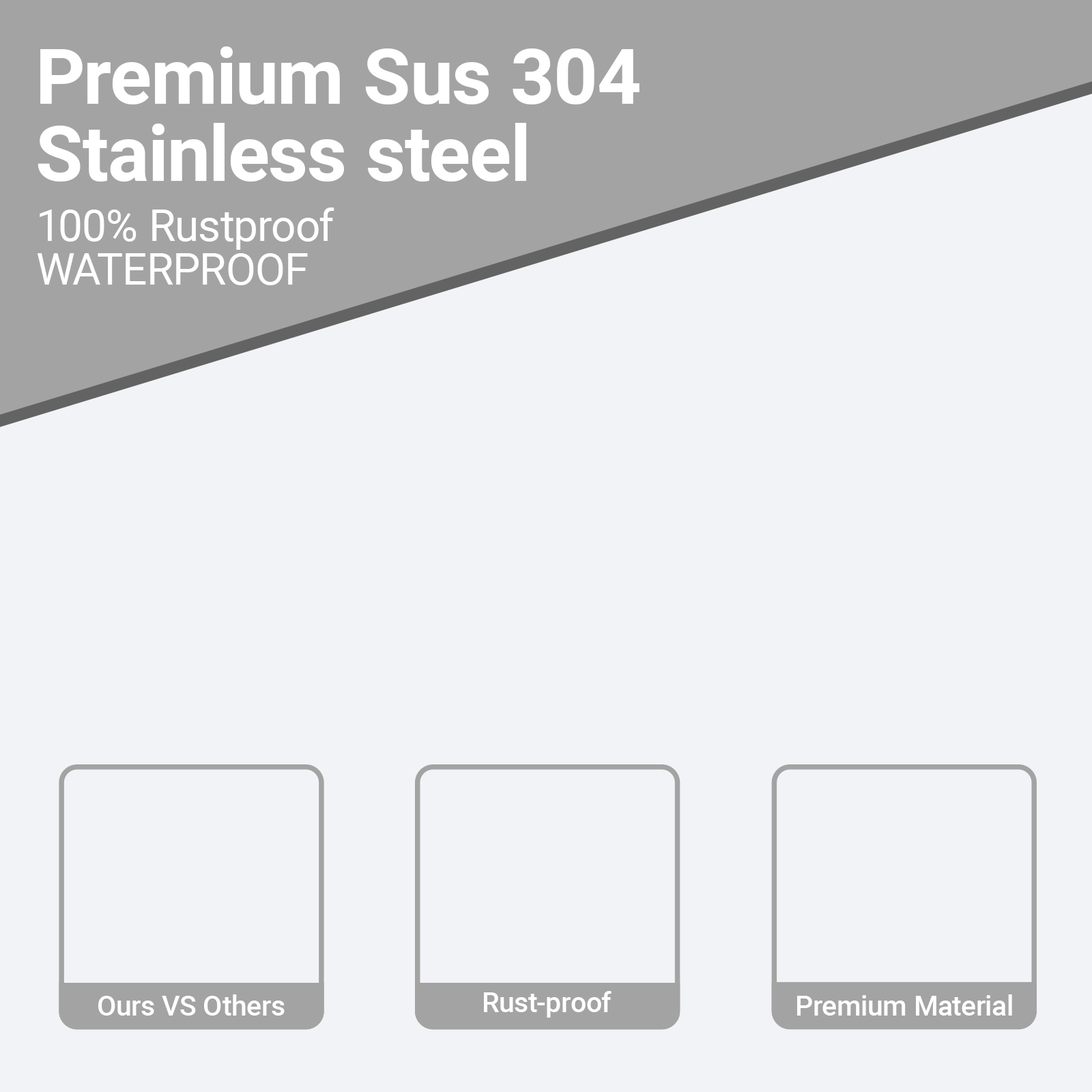
<style>
.page{position:relative;width:1092px;height:1092px;background:#f2f3f6}
.page>*{position:absolute;margin:0}
.t1{font:77.2px/77.2px "Roboto-Bold";color:#ffffff}
.t2{font:43.7px/43.7px "Roboto-Regular";color:#ffffff}
.t3{font:27.7px "Roboto-Medium";color:#ffffff}
</style>
<div class="page">
<p class="t1" style="left:38px;top:46px;width:601px;height:136px">Premium Sus 304<br>Stainless steel</p>
<p class="t2" style="left:37px;top:207px;width:297px;height:78px">100% Rustproof<br>WATERPROOF</p>
<p class="t3" style="left:98px;top:994px;width:187px;height:22px">Ours VS Others</p>
<p class="t3" style="left:484px;top:991px;width:128px;height:27px">Rust-proof</p>
<p class="t3" style="left:797px;top:994px;width:215px;height:22px">Premium Material</p>
</div>
